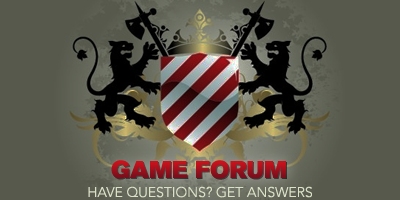
<style>
.page{position:relative;width:400px;height:200px;background:#56594c}
.page>*{position:absolute;margin:0}
.t1{font:24px "AkzidenzGroteskBQ-Super";text-transform:uppercase}
.t2{font:14px "AvenirLTStd-Light";color:#dbe1c7;text-transform:uppercase}
</style>
<div class="page">
<p class="t1" style="left:111px;top:160px;width:175px;height:19px">game forum</p>
<p class="t2" style="left:88px;top:186px;width:224px;height:12px">Have questions? Get answers</p>
</div>
